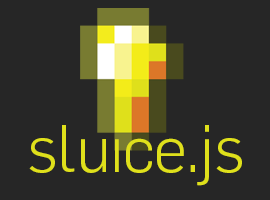
<style>
.page{position:relative;width:270px;height:200px;background:#262626}
.page>*{position:absolute;margin:0}
.t1{font:66px "Flama-Light";letter-spacing:-0.01em;color:#dfe01b}
</style>
<div class="page">
<p class="t1" style="left:29px;top:125px;width:213px;height:61px">sluice.js</p>
</div>
